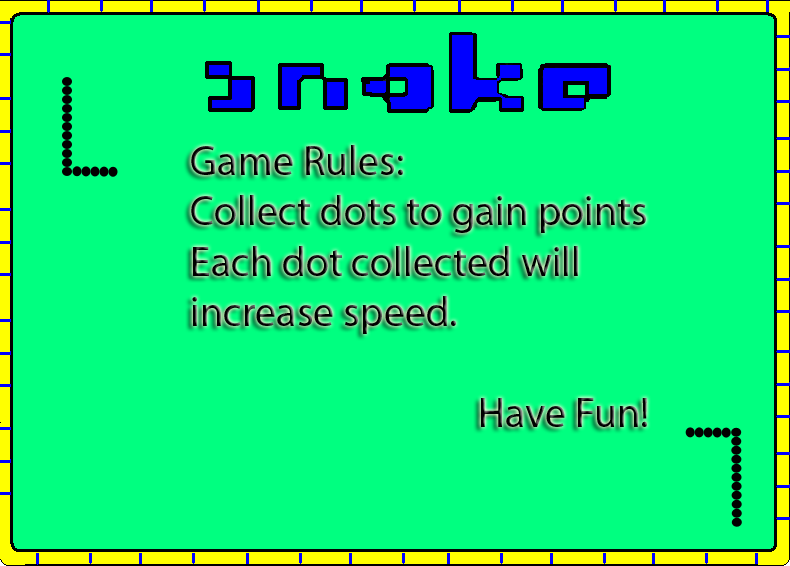
<style>
.page{position:relative;width:790px;height:566px;background:#00ff80}
.page>*{position:absolute;margin:0}
.t1{font:42px "MyriadPro-Regular";color:#000000}
</style>
<div class="page">
<p class="t1" style="left:191px;top:145px;width:456px;height:282px">Game Rules:<br>Collect dots to gain points<br>Each dot collected will <br>increase speed.<br><br>        Have Fun!</p>
</div>
